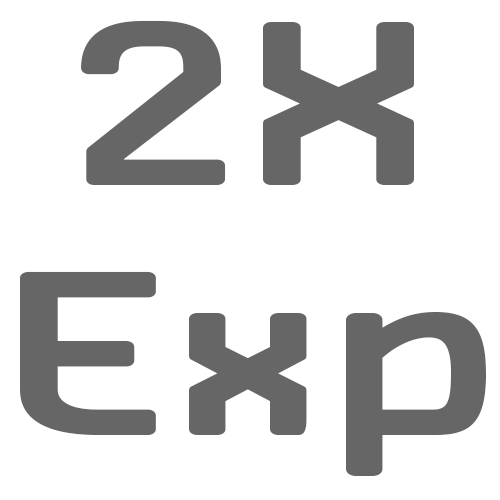
<style>
.page{position:relative;width:500px;height:500px;background:#ffffff}
.page>*{position:absolute;margin:0}
.t1{font:208.3px "Antwerpen-Regular";color:#666666;scale:1.38 1}
</style>
<div class="page">
<p class="t1" style="left:20px;top:20px;width:466px;height:456px;text-align:center">2X<br>Exp</p>
</div>
